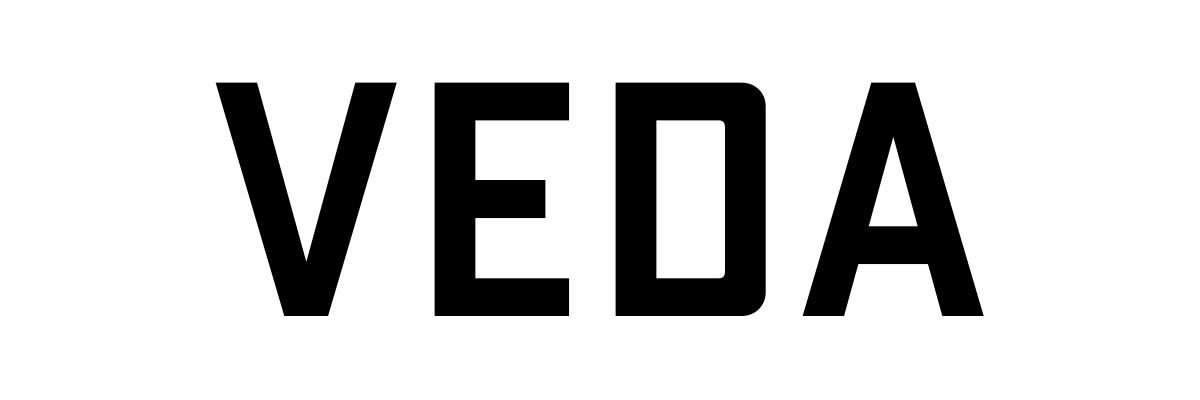
<style>
.page{position:relative;width:1200px;height:400px;background:#ffffff}
.page>*{position:absolute;margin:0}
.t1{font:333.3px "mr_ApexMk3-Medium";letter-spacing:0.05em;color:#000000}
</style>
<div class="page">
<p class="t1" style="left:215px;top:82px;width:769px;height:234px">VEDA</p>
</div>
